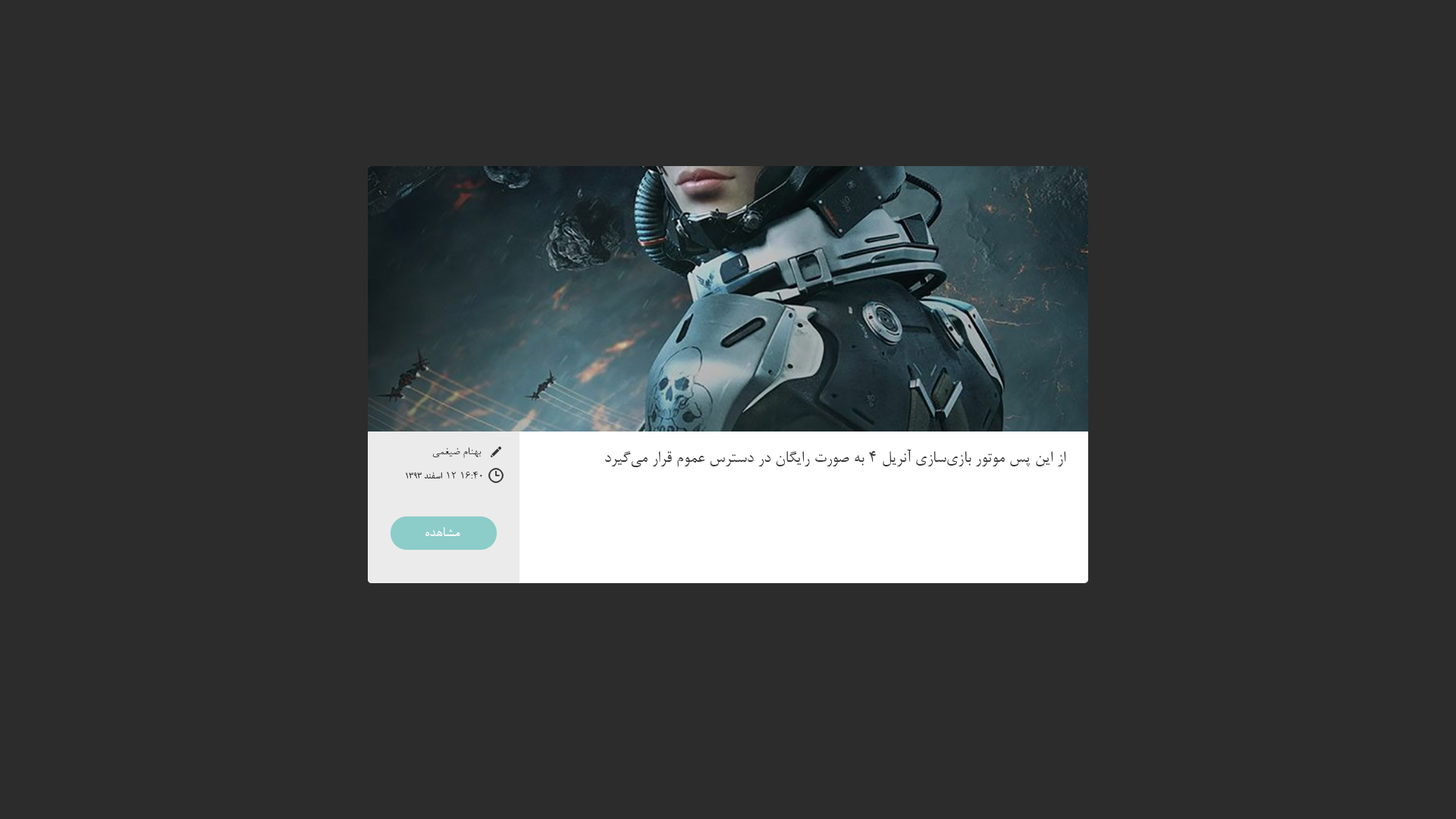
<style>
.page{position:relative;width:1456px;height:819px;background:#2c2c2c}
.page>*{position:absolute;margin:0}
.t1{font:12.1px "BNazanin";color:#363636}
.t2{font:18.2px "BNazanin";color:#363636}
.t3{font:12.1px "AdobeArabic-Regular";color:#363636}
.t4{font:15.2px "BNazanin";color:#ffffff}
</style>
<div class="page">
<p class="t1" style="left:432px;top:447px;width:50px;height:11px">بهنام ضیغمی</p>
<p class="t2" style="left:605px;top:449px;width:461px;height:18px">از این پس موتور بازی‌سازی آنریل 4 به صورت رایگان در دسترس عموم قرار می‌گیرد</p>
<p class="t3" style="left:406px;top:472px;width:76px;height:7px"><span class="t1">16:40 12 </span>اسفند 1393</p>
<p class="t4" style="left:425px;top:527px;width:35px;height:9px">مشاهده</p>
</div>
